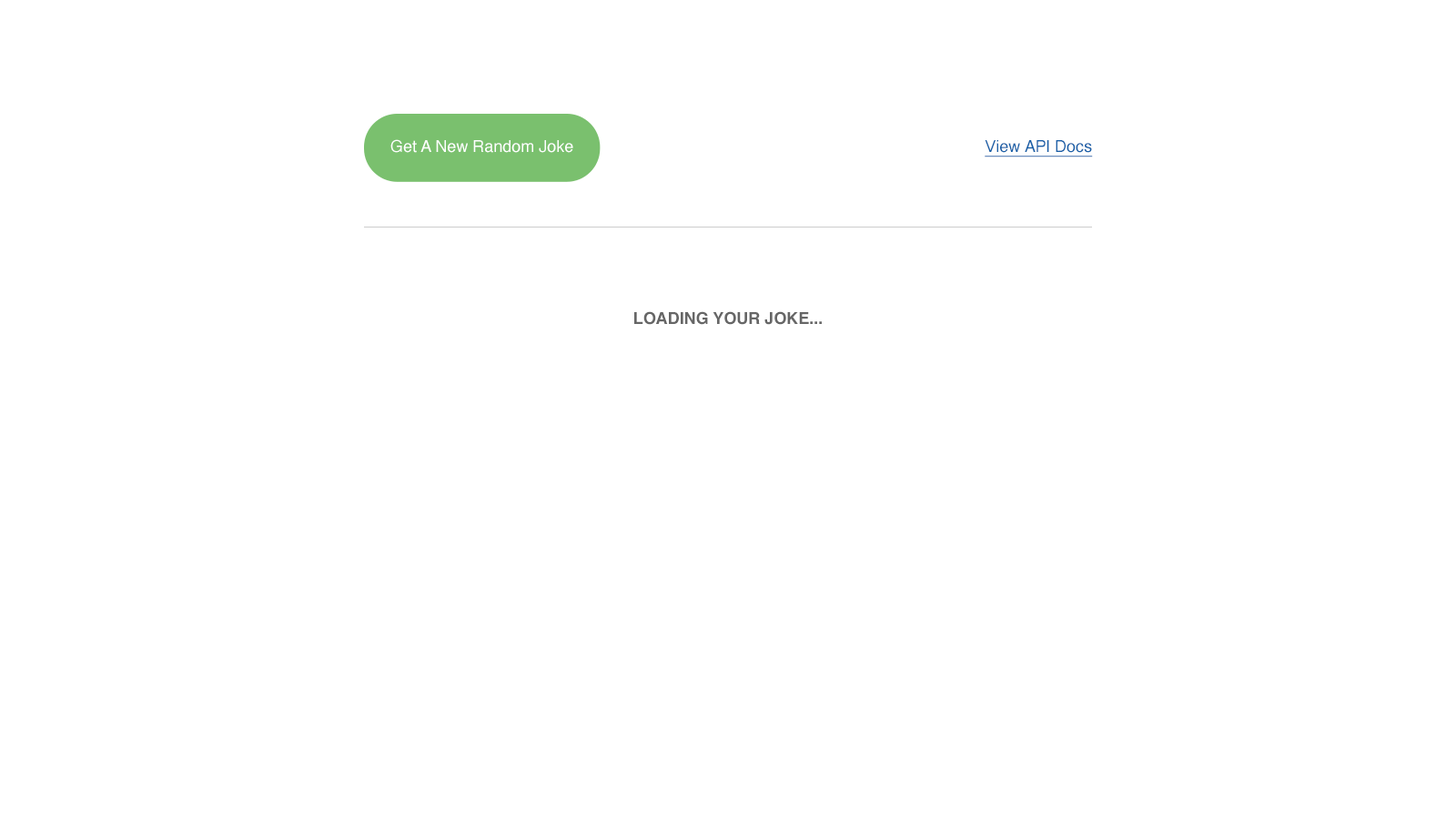
<style>
.page{position:relative;width:1456px;height:819px;background:#ffffff}
.page>*{position:absolute;margin:0}
.t1{font:16.4px "Helvetica";color:#ffffff}
.t2{font:16.4px "Helvetica";color:#1860a8;text-decoration:underline}
.t3{font:16.4px "Helvetica-Bold";color:#666666}
</style>
<div class="page">
<p class="t1" style="left:390px;top:139px;width:183px;height:14px">Get A New Random Joke</p>
<p class="t2" style="left:985px;top:140px;width:108px;height:17px">View API Docs</p>
<p class="t3" style="left:634px;top:311px;width:188px;height:14px">LOADING YOUR JOKE...</p>
</div>
